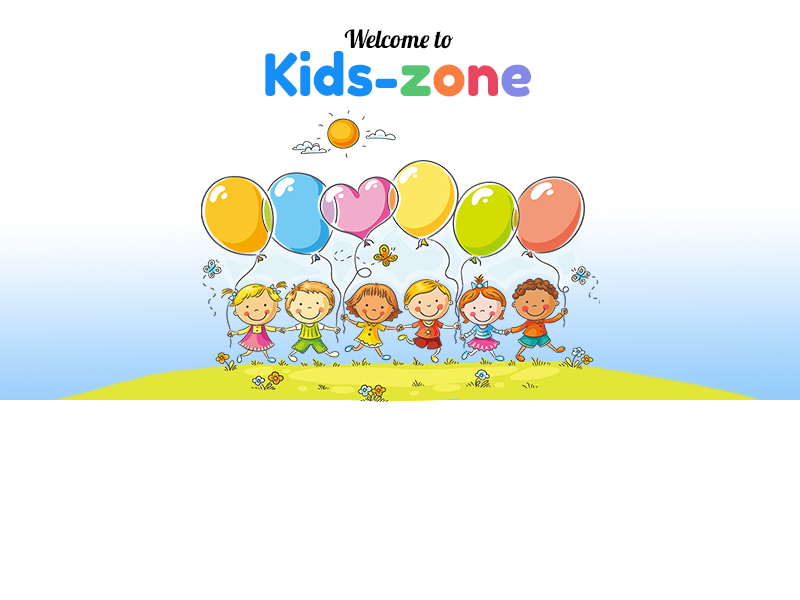
<style>
.page{position:relative;width:800px;height:600px;background:#fffefe}
.page>*{position:absolute;margin:0}
.t1{font:25px "Lobster-Regular";color:#000000;scale:0.97 1}
.t2{font:58.3px "FredokaOne-Regular";color:#148ff8;scale:0.97 1}
.t3{font:58.3px "FredokaOne-Regular";color:#56c572;scale:0.97 1}
.t4{font:58.3px "FredokaOne-Regular";color:#fa7e3f;scale:0.97 1}
.t5{font:58.3px "FredokaOne-Regular";color:#e84560;scale:0.97 1}
.t6{font:58.3px "FredokaOne-Regular";color:#8488e7;scale:0.97 1}
</style>
<div class="page">
<p class="t1" style="left:344px;top:29px;width:110px;height:20px">Welcome to</p>
<p class="t2" style="left:265px;top:51px;width:266px;height:46px">Kids-<span class="t3">z</span><span class="t4">o</span><span class="t5">n</span><span class="t6">e</span></p>
</div>
